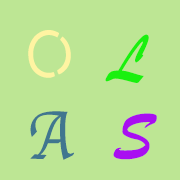
<style>
.page{position:relative;width:180px;height:180px;background:#bde694}
.page>*{position:absolute;margin:0}
.t1{font:70.8px "DFWaWaSC-W5";letter-spacing:0.12em;color:#fff4a2;scale:0.89 1}
.t2{font:70.8px "STXingkai";letter-spacing:0.12em;color:#19f10e;scale:0.89 1}
.t3{font:70.8px "Apple-Chancery";letter-spacing:0.12em;color:#40768f;scale:0.89 1}
.t4{font:70.8px "BrushScriptMT";letter-spacing:0.12em;color:#a90ef1;scale:0.89 1}
</style>
<div class="page">
<p class="t1" style="left:28px;top:30px;width:43px;height:48px">O</p>
<p class="t2" style="left:105px;top:34px;width:44px;height:49px">L</p>
<p class="t3" style="left:30px;top:111px;width:44px;height:49px">A</p>
<p class="t4" style="left:113px;top:113px;width:44px;height:47px">S</p>
</div>
